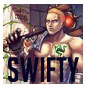
<style>
.page{position:relative;width:86px;height:87px}
.page>*{position:absolute;margin:0}
.t1{font:34px "BigNoodleTitling";color:#080422}
</style>
<div class="page">
<p class="t1" style="left:8px;top:57px;width:71px;height:25px">Swifty</p>
</div>
